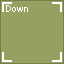
<style>
.page{position:relative;width:64px;height:64px;background:#95a061}
.page>*{position:absolute;margin:0}
.t1{font:10px "SourceCodePro-Regular";color:#ffffff}
</style>
<div class="page">
<p class="t1" style="left:6px;top:5px;width:22px;height:7px">Down</p>
</div>
